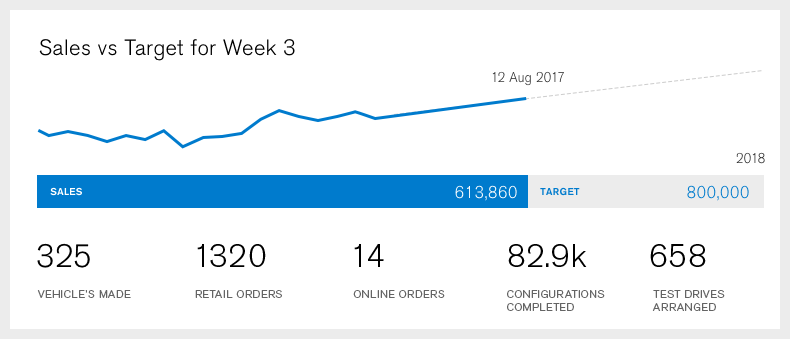
<style>
.page{position:relative;width:790px;height:339px;background:#ffffff}
.page>*{position:absolute;margin:0}
.t1{font:22px "VolvoSansPro-Light";letter-spacing:0.025em;color:#000000}
.t2{font:13px "VolvoSansPro-Light";letter-spacing:0.025em;color:#333333}
.t3{font:16px "VolvoSansPro-Light";letter-spacing:0.04em;color:#ffffff}
.t4{font:16px "VolvoSansPro-Light";letter-spacing:0.04em;color:#007bcd}
.t5{font:10px "VolvoSansPro-Medium";letter-spacing:0.04em;color:#ffffff;text-transform:uppercase}
.t6{font:10px "VolvoSansPro-Medium";letter-spacing:0.04em;color:#007bcd;text-transform:uppercase}
.t7{font:32px "VolvoSansPro-Light";letter-spacing:0.025em;color:#000000}
.t8{font:11px "VolvoSansPro-Light";letter-spacing:0.05em;color:#646464;text-transform:uppercase}
</style>
<div class="page">
<p class="t1" style="left:39px;top:39px;width:256px;height:22px">Sales vs Target for Week 3</p>
<p class="t2" style="left:492px;top:71px;width:72px;height:15px">12 Aug 2017</p>
<p class="t2" style="left:736px;top:152px;width:29px;height:12px">2018</p>
<p class="t3" style="left:455px;top:185px;width:62px;height:16px">613,860</p>
<p class="t4" style="left:687px;top:185px;width:62px;height:16px">800,000</p>
<p class="t5" style="left:50px;top:187px;width:32px;height:9px">Sales</p>
<p class="t6" style="left:540px;top:187px;width:40px;height:9px">Target</p>
<p class="t7" style="left:37px;top:243px;width:53px;height:25px">325</p>
<p class="t7" style="left:197px;top:244px;width:69px;height:23px">1320</p>
<p class="t7" style="left:354px;top:244px;width:30px;height:23px">14</p>
<p class="t7" style="left:508px;top:244px;width:79px;height:23px">82.9k</p>
<p class="t7" style="left:650px;top:244px;width:56px;height:23px">658</p>
<p class="t8" style="left:37px;top:290px;width:94px;height:8px">VEHICLE’s made</p>
<p class="t8" style="left:195px;top:290px;width:87px;height:8px">Retail orders</p>
<p class="t8" style="left:353px;top:290px;width:92px;height:8px">Online orders</p>
<p class="t8" style="left:507px;top:290px;width:98px;height:21px">configurations<br>completed</p>
<p class="t8" style="left:652px;top:290px;width:73px;height:21px">Test drives<br>arranged</p>
</div>
